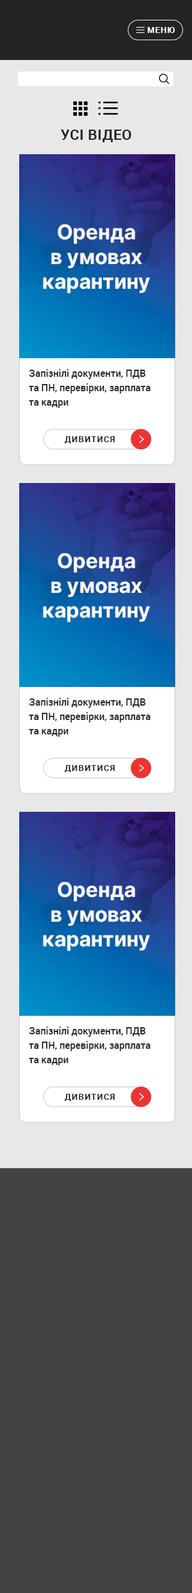
<style>
.page{position:relative;width:192px;height:1593px;background:#434343}
.page>*{position:absolute;margin:0}
.t1{font:8.4px "Roboto-Bold";letter-spacing:0.075em;color:#ffffff;text-transform:uppercase}
.t2{font:14.4px "Roboto-Bold";letter-spacing:0.025em;color:#232323;text-transform:uppercase}
.t3{font:9.6px/14.4px "Roboto-Medium";color:#232323}
.t4{font:8.4px "Roboto-Bold";letter-spacing:0.1em;color:#232323;text-transform:uppercase}
</style>
<div class="page">
<p class="t1" style="left:148px;top:27px;width:27px;height:6px">МЕНю</p>
<p class="t2" style="left:61px;top:130px;width:70px;height:12px">Усі відео</p>
<p class="t3" style="left:29px;top:369px;width:122px;height:39px">Запізнілі документи, ПДВ та ПН, перевірки, зарплата та кадри</p>
<p class="t4" style="left:64px;top:436px;width:51px;height:7px">ДИВИТИСЯ</p>
<p class="t3" style="left:29px;top:698px;width:122px;height:39px">Запізнілі документи, ПДВ та ПН, перевірки, зарплата та кадри</p>
<p class="t4" style="left:64px;top:765px;width:51px;height:7px">ДИВИТИСЯ</p>
<p class="t3" style="left:29px;top:1027px;width:122px;height:39px">Запізнілі документи, ПДВ та ПН, перевірки, зарплата та кадри</p>
<p class="t4" style="left:64px;top:1094px;width:51px;height:7px">ДИВИТИСЯ</p>
</div>
